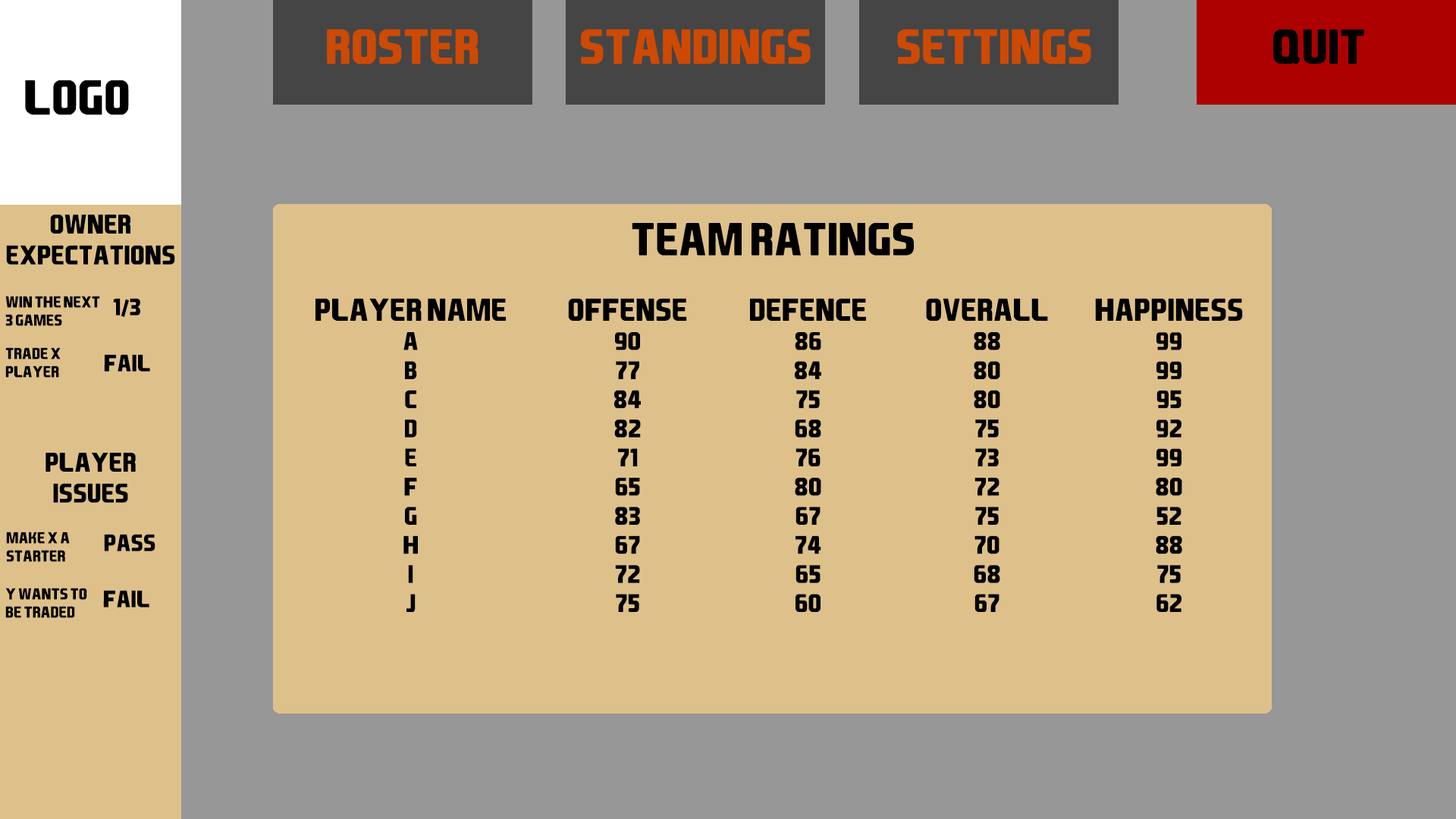
<style>
.page{position:relative;width:1456px;height:819px;background:#dec08a}
.page>*{position:absolute;margin:0}
.t1{font:47px "EASPORTS";color:#ce4a02}
.t2{font:47px "EASPORTS";color:#000000}
.t3{font:25.8px "EASPORTS";color:#000000}
.t4{font:44.2px "EASPORTS";color:#000000}
.t5{font:15.2px "EASPORTS";color:#000000}
.t6{font:22.7px "EASPORTS";color:#000000}
.t7{font:22.7px "BerlinSansFB-Bold";color:#000000}
.t8{font:24.3px "EASPORTS";color:#000000}
.t9{font:30.3px "EASPORTS";color:#000000}
</style>
<div class="page">
<p class="t1" style="left:327px;top:29px;width:152px;height:35px">Roster</p>
<p class="t1" style="left:581px;top:29px;width:230px;height:35px">Standings</p>
<p class="t1" style="left:897px;top:29px;width:194px;height:35px">Settings</p>
<p class="t2" style="left:1273px;top:29px;width:91px;height:35px">Quit</p>
<p class="t2" style="left:25px;top:80px;width:104px;height:35px">Logo</p>
<p class="t3" style="left:6px;top:215px;width:169px;height:50px;text-align:center">Owner Expectations</p>
<p class="t4" style="left:632px;top:223px;width:282px;height:33px">team ratings</p>
<p class="t5" style="left:5px;top:296px;width:95px;height:30px">Win the next 3 games</p>
<p class="t6" style="left:113px;top:298px;width:27px;height:19px">1<span class="t7">/</span>3</p>
<p class="t8" style="left:315px;top:298px;width:191px;height:314px;text-align:center"><span class="t9">Player name<br></span>a<br>b<br>c<br>d<br>e<br>f<br>g<br>h<br>i<br>j</p>
<p class="t8" style="left:568px;top:298px;width:119px;height:314px;text-align:center"><span class="t9">offense<br></span>90<br>77<br>84<br>82<br>71<br>65<br>83<br>67<br>72<br>75</p>
<p class="t8" style="left:750px;top:298px;width:116px;height:314px;text-align:center"><span class="t9">defence<br></span>86<br>84<br>75<br>68<br>76<br>80<br>67<br>74<br>65<br>60</p>
<p class="t8" style="left:926px;top:298px;width:122px;height:314px;text-align:center"><span class="t9">Overall<br></span>88<br>80<br>80<br>75<br>73<br>72<br>75<br>70<br>68<br>67</p>
<p class="t8" style="left:1095px;top:298px;width:148px;height:314px;text-align:center"><span class="t9">Happiness<br></span>99<br>99<br>95<br>92<br>99<br>80<br>52<br>88<br>75<br>62</p>
<p class="t5" style="left:5px;top:347px;width:56px;height:31px">Trade x player</p>
<p class="t6" style="left:104px;top:354px;width:46px;height:18px">Fail</p>
<p class="t3" style="left:45px;top:453px;width:91px;height:50px;text-align:center">player <br>issues</p>
<p class="t5" style="left:6px;top:532px;width:64px;height:30px">Make x a starter</p>
<p class="t6" style="left:104px;top:534px;width:51px;height:17px">Pass</p>
<p class="t5" style="left:5px;top:588px;width:82px;height:30px">y wants to be traded</p>
<p class="t6" style="left:103px;top:590px;width:46px;height:17px">fail</p>
</div>
